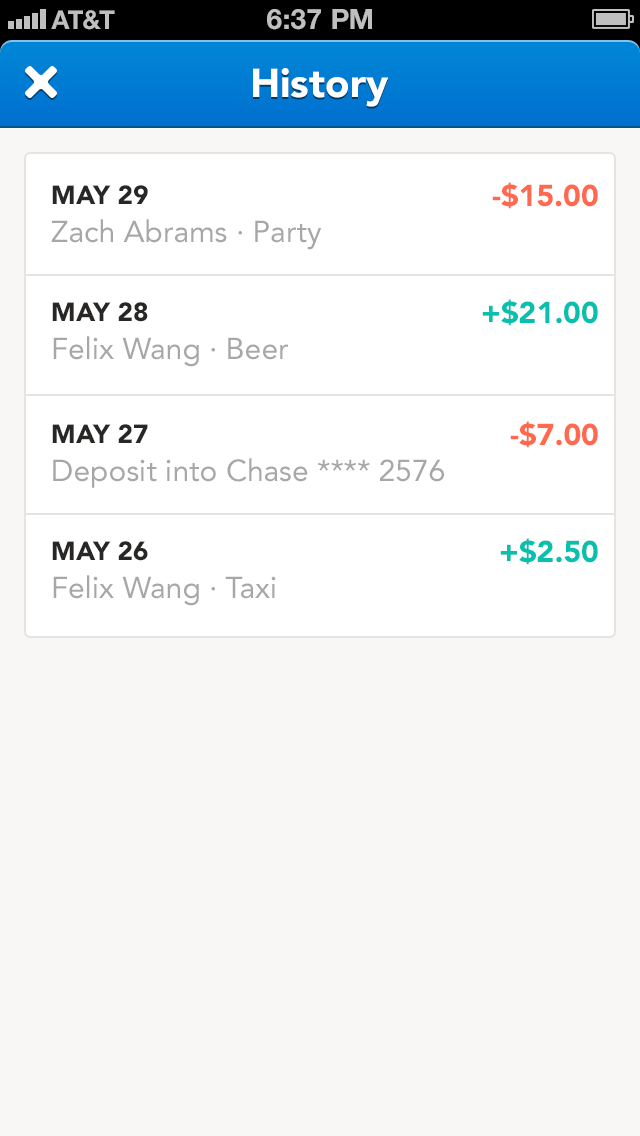
<style>
.page{position:relative;width:640px;height:1136px;background:#f9f7f6}
.page>*{position:absolute;margin:0}
.t1{font:40px "Avenir-Black";color:#ffffff}
.t2{font:30px/38px "Avenir-Roman";color:#999694}
.t3{font:26px/38px "Avenir-Black";color:#282726;text-transform:uppercase}
.t4{font:30px/38px "Avenir-Roman";color:#a7a7a7}
.t5{font:30px "Avenir-Black";color:#ff6950}
.t6{font:30px "Avenir-Black";color:#08c0ad}
</style>
<div class="page">
<p class="t1" style="left:253px;top:68px;width:135px;height:39px">History</p>
<p class="t2" style="left:51px;top:185px;width:271px;height:65px"><span class="t3">May 29<br></span><span class="t4">Zach Abrams · Party<br></span>for beer and charcoal.</p>
<p class="t5" style="left:492px;top:182px;width:106px;height:27px">-$15.00</p>
<p class="t2" style="left:52px;top:302px;width:236px;height:65px"><span class="t3">May 28<br></span><span class="t4">Felix Wang · Beer<br></span>for beer and charcoal.</p>
<p class="t6" style="left:482px;top:299px;width:116px;height:27px">+$21.00</p>
<p class="t4" style="left:52px;top:424px;width:392px;height:64px"><span class="t3">May 27<br></span>Deposit into Chase **** 2576<br><span class="t2">for beer and charcoal.</span></p>
<p class="t5" style="left:510px;top:421px;width:88px;height:27px">-$7.00</p>
<p class="t2" style="left:52px;top:541px;width:224px;height:65px"><span class="t3">May 26<br></span><span class="t4">Felix Wang · Taxi<br></span>for beer and charcoal.</p>
<p class="t6" style="left:500px;top:538px;width:98px;height:27px">+$2.50</p>
</div>
